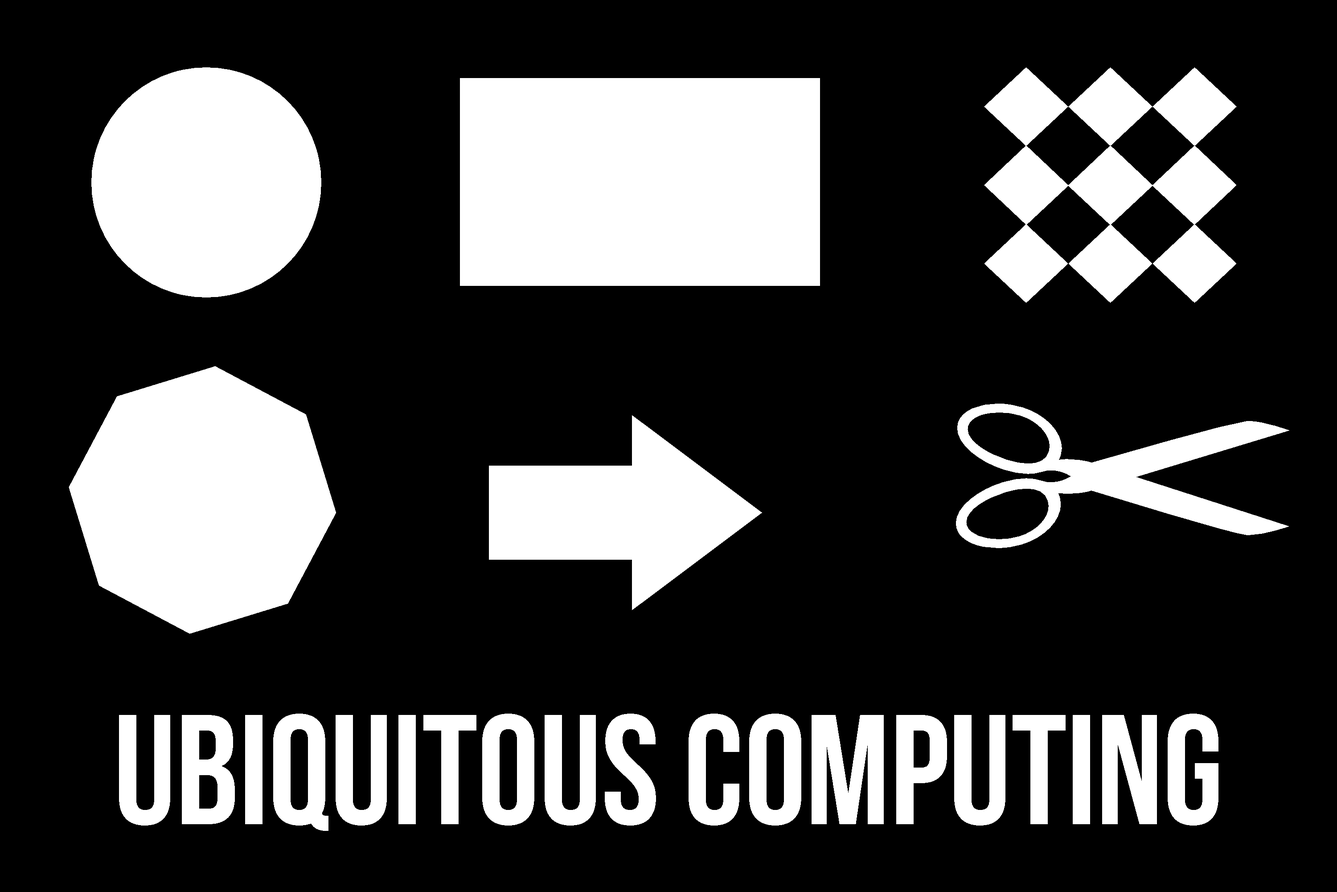
<style>
.page{position:relative;width:1337px;height:892px;background:#000000}
.page>*{position:absolute;margin:0}
.t1{font:156px "BebasNeue";color:#ffffff}
</style>
<div class="page">
<p class="t1" style="left:119px;top:713px;width:1100px;height:118px">Ubiquitous Computing</p>
</div>
